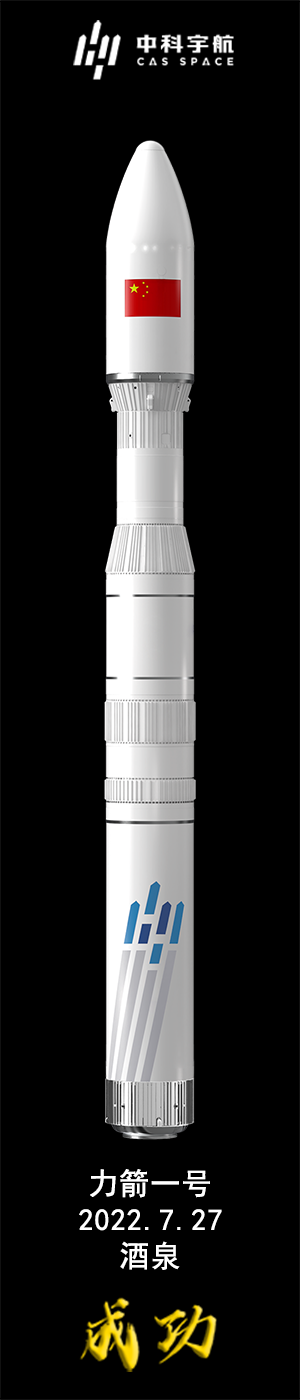
<style>
.page{position:relative;width:300px;height:1400px;background:#000000}
.page>*{position:absolute;margin:0}
.t1{font:30px "SimHei";letter-spacing:0.01em;color:#ffffff;font-weight:bold}
</style>
<div class="page">
<p class="t1" style="left:90px;top:1169px;width:120px;height:29px">力箭一号</p>
<p class="t1" style="left:79px;top:1209px;width:143px;height:22px">2022.7.27</p>
<p class="t1" style="left:120px;top:1241px;width:60px;height:29px">酒泉</p>
</div>
